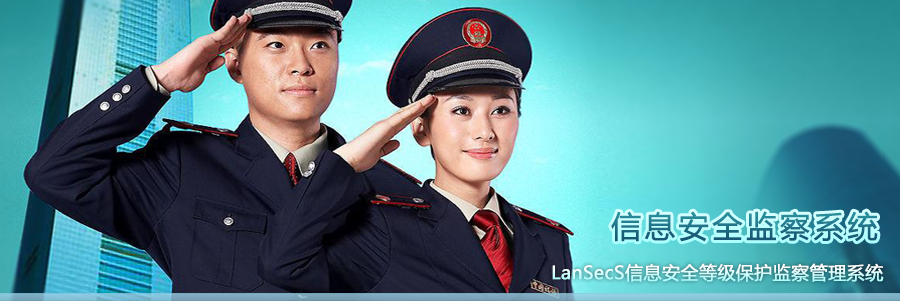
<style>
.page{position:relative;width:900px;height:301px}
.page>*{position:absolute;margin:0}
.t1{font:30px "MicrosoftYaHei";letter-spacing:0.1em;font-weight:bold}
.t2{font:18px "MicrosoftYaHei";font-weight:bold}
</style>
<div class="page">
<p class="t1" style="left:611px;top:211px;width:267px;height:31px">信息安全监察系统</p>
<p class="t2" style="left:552px;top:263px;width:332px;height:19px">LanSecS信息安全等级保护监察管理系统</p>
</div>
